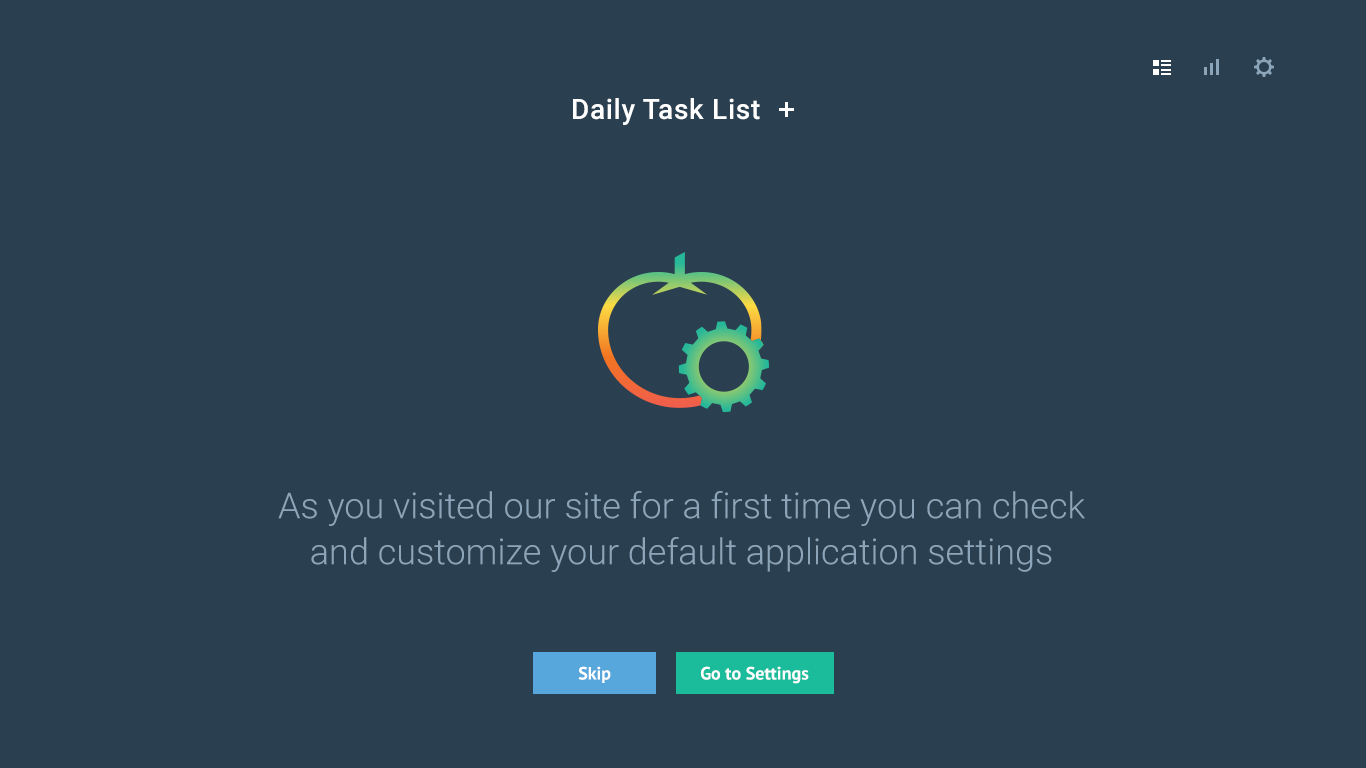
<style>
.page{position:relative;width:1366px;height:768px;background:#2a3f50}
.page>*{position:absolute;margin:0}
.t1{font:28px "Roboto-Medium";letter-spacing:0.025em;color:#ffffff}
.t2{font:36px/46px "Roboto-Light";color:#8da5b8}
.t3{font:18px "PTSans-Bold";color:#ffffff}
</style>
<div class="page">
<p class="t1" style="left:573px;top:98px;width:187px;height:27px">Daily Task List</p>
<p class="t2" style="left:278px;top:491px;width:807px;height:81px;text-align:center">As you visited our site for a first time you can check<br>and customize your default application settings</p>
<p class="t3" style="left:578px;top:666px;width:33px;height:17px">Skip</p>
<p class="t3" style="left:701px;top:666px;width:108px;height:18px">Go to Settings</p>
</div>
